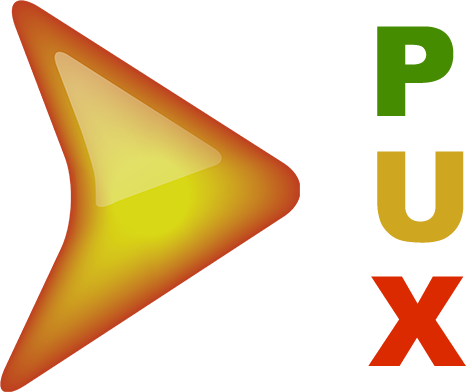
<style>
.page{position:relative;width:472px;height:392px;background:#ffffff}
.page>*{position:absolute;margin:0}
.t1{font:125px/125px "Arial-Black";color:#468c00}
.t2{font:125px/125px "Arial-Black";color:#cea61f}
.t3{font:125px/125px "Arial-Black";color:#db2900}
</style>
<div class="page">
<p class="t1" style="left:368px;top:26px;width:98px;height:340px">P<br><span class="t2">U<br></span><span class="t3">X</span></p>
</div>
